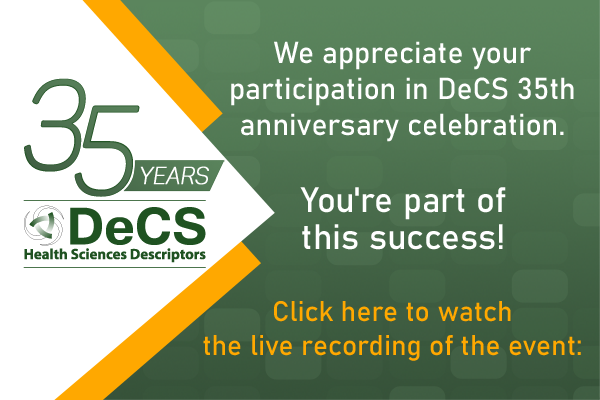
<style>
.page{position:relative;width:600px;height:400px;background:#ffffff}
.page>*{position:absolute;margin:0}
.t1{font:30px "Bahnschrift";color:#ffffff}
.t2{font:123.7px "Panton-LightitalicCaps";color:#4a6e4c;font-weight:bold;scale:0.9 1}
.t3{font:123.7px "Panton-LightitalicCaps";color:#4b714d;font-weight:bold;scale:0.9 1}
.t4{font:24.3px "Panton-LightitalicCaps";color:#ffffff;font-weight:bold;scale:0.9 1}
.t5{font:35px/51px "Bahnschrift";color:#ffffff}
.t6{font:28px "Bahnschrift";color:#ffa800}
.t7{font:28px/51px "Bahnschrift";color:#ffffff}
</style>
<div class="page">
<p class="t1" style="left:231px;top:41px;width:343px;height:101px;text-align:center">We appreciate your<br>participation in DeCS 35th<br>anniversary celebration.</p>
<p class="t2" style="left:24px;top:78px;width:62px;height:94px">3</p>
<p class="t3" style="left:74px;top:105px;width:66px;height:92px">5</p>
<p class="t4" style="left:140px;top:166px;width:69px;height:19px">YEARS</p>
<p class="t5" style="left:300px;top:187px;width:206px;height:63px;text-align:center">You're part of<br>this success!</p>
<p class="t6" style="left:203px;top:301px;width:378px;height:60px;text-align:center"><span class="t7"><br></span>Click here to watch<br>the live recording of the event:</p>
</div>
